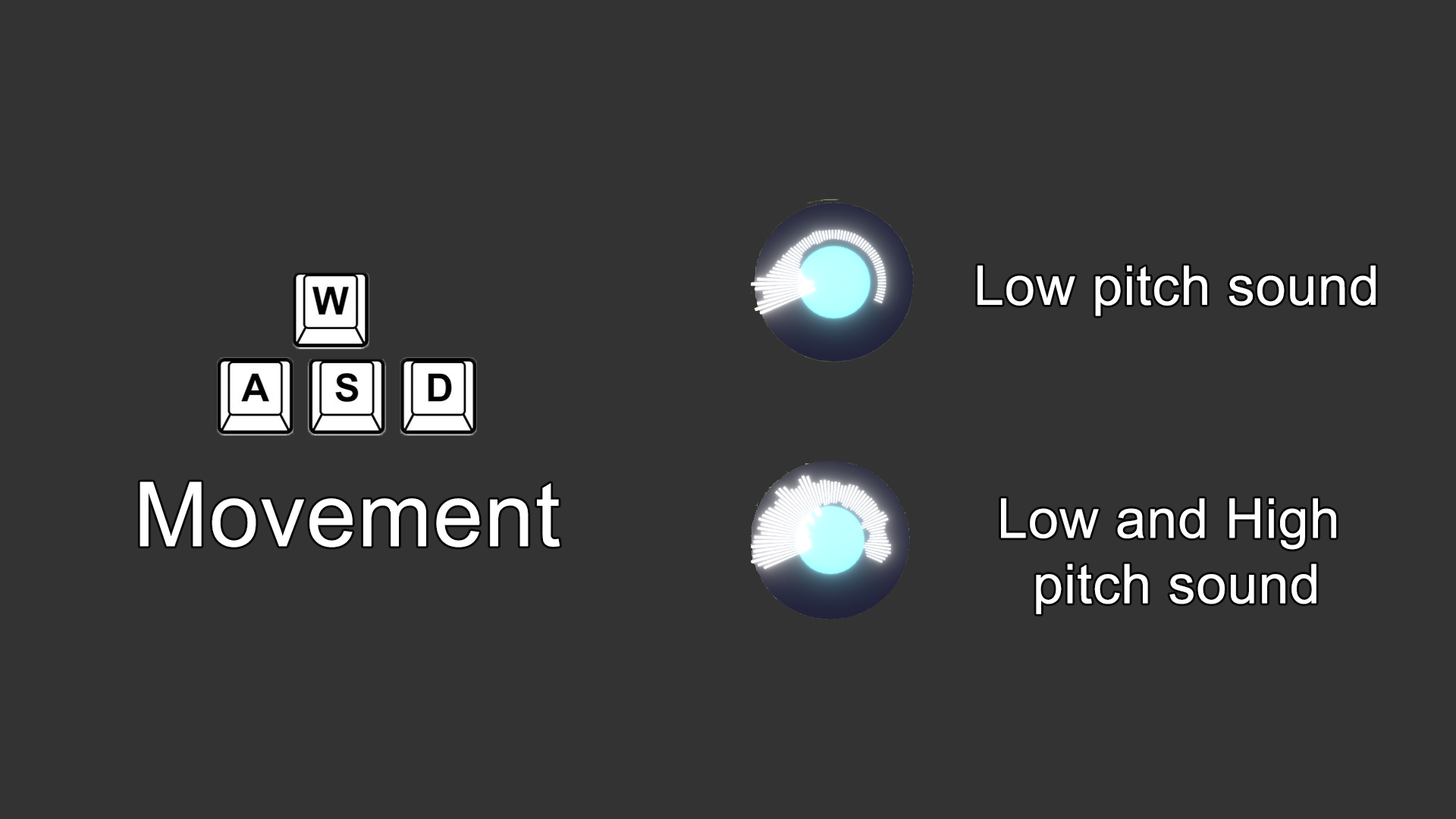
<style>
.page{position:relative;width:1456px;height:819px;background:#333333}
.page>*{position:absolute;margin:0}
.t1{font:54.6px "ArialMT";letter-spacing:0.015em;color:#ffffff}
.t2{font:89.4px "ArialMT";letter-spacing:0.015em;color:#ffffff}
</style>
<div class="page">
<p class="t1" style="left:977px;top:265px;width:399px;height:51px">Low pitch sound</p>
<p class="t2" style="left:140px;top:482px;width:420px;height:66px">Movement</p>
<p class="t1" style="left:1001px;top:498px;width:335px;height:116px;text-align:center">Low and High <br>pitch sound</p>
</div>
